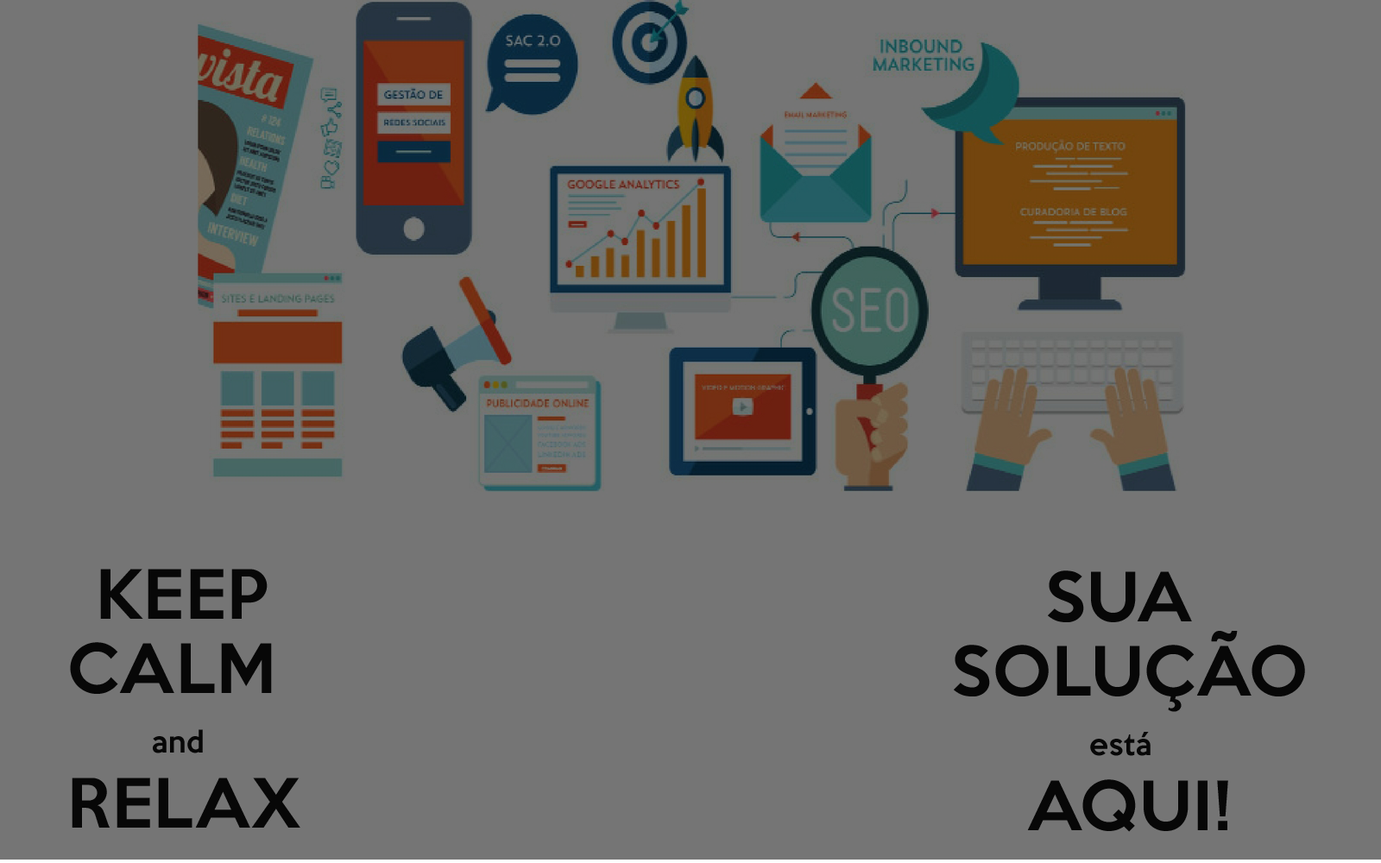
<style>
.page{position:relative;width:1381px;height:863px;background:#757575}
.page>*{position:absolute;margin:0}
.t1{font:62.2px "KeepCalm-Medium";letter-spacing:0.025em;color:#040404}
.t2{font:82.9px "KeepCalm-Medium";letter-spacing:0.025em;color:#040404}
.t3{font:27.6px "KeepCalm-Medium";letter-spacing:0.025em;color:#040404}
</style>
<div class="page">
<p class="t1" style="left:70px;top:569px;width:230px;height:259px"><span class="t2"> </span>KEEP <br>CALM<br><span class="t3">         and <br></span>RELAX</p>
<p class="t1" style="left:954px;top:571px;width:351px;height:261px;text-align:center">SUA <br>SOLUÇÃO<br><span class="t3">está <br></span>AQUI!</p>
</div>
